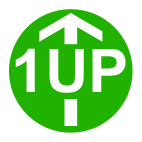
<style>
.page{position:relative;width:142px;height:142px;background:#ffffff}
.page>*{position:absolute;margin:0}
.t1{font:60px "Arial-BoldMT";color:#ffffff}
</style>
<div class="page">
<p class="t1" style="left:15px;top:48px;width:111px;height:45px">1UP</p>
</div>
